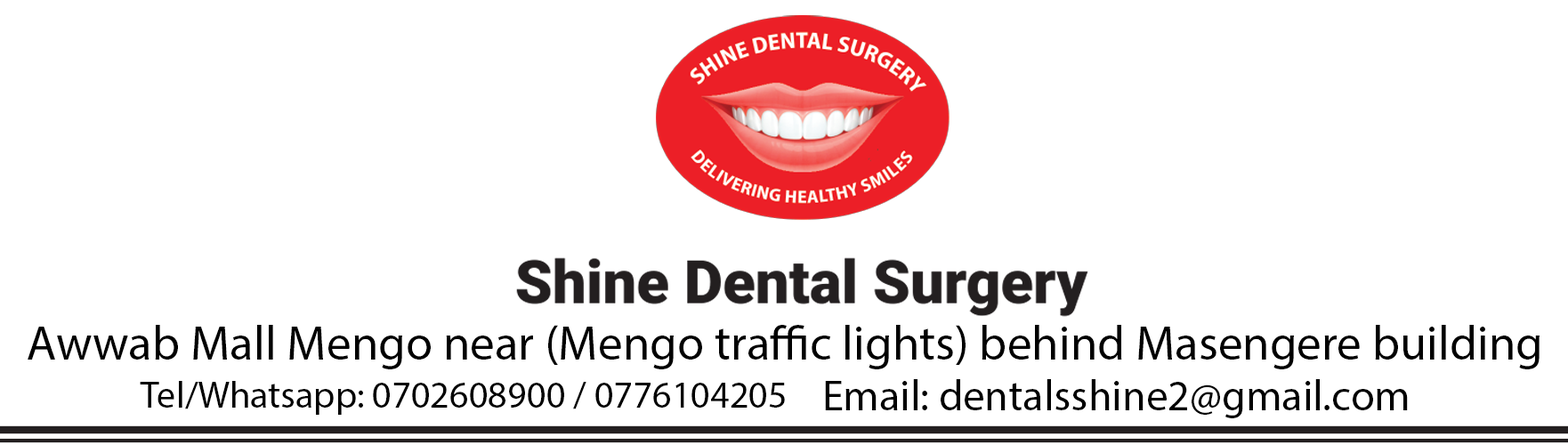
<style>
.page{position:relative;width:1568px;height:445px;background:#ffffff}
.page>*{position:absolute;margin:0}
.t1{font:48.2px "MyriadPro-Regular";color:#000000}
.t2{font:37.1px "MyriadPro-Regular";color:#000000}
.t3{font:42.6px "MyriadPro-Regular";color:#000000}
</style>
<div class="page">
<p class="t1" style="left:28px;top:325px;width:1512px;height:44px">Awwab Mall Mengo near (Mengo traffic lights) behind Masengere building</p>
<p class="t2" style="left:140px;top:381px;width:645px;height:34px">Tel/Whatsapp: 0702608900 / 0776104205</p>
<p class="t3" style="left:825px;top:379px;width:583px;height:39px">Email: dentalsshine2@gmail.com</p>
</div>
